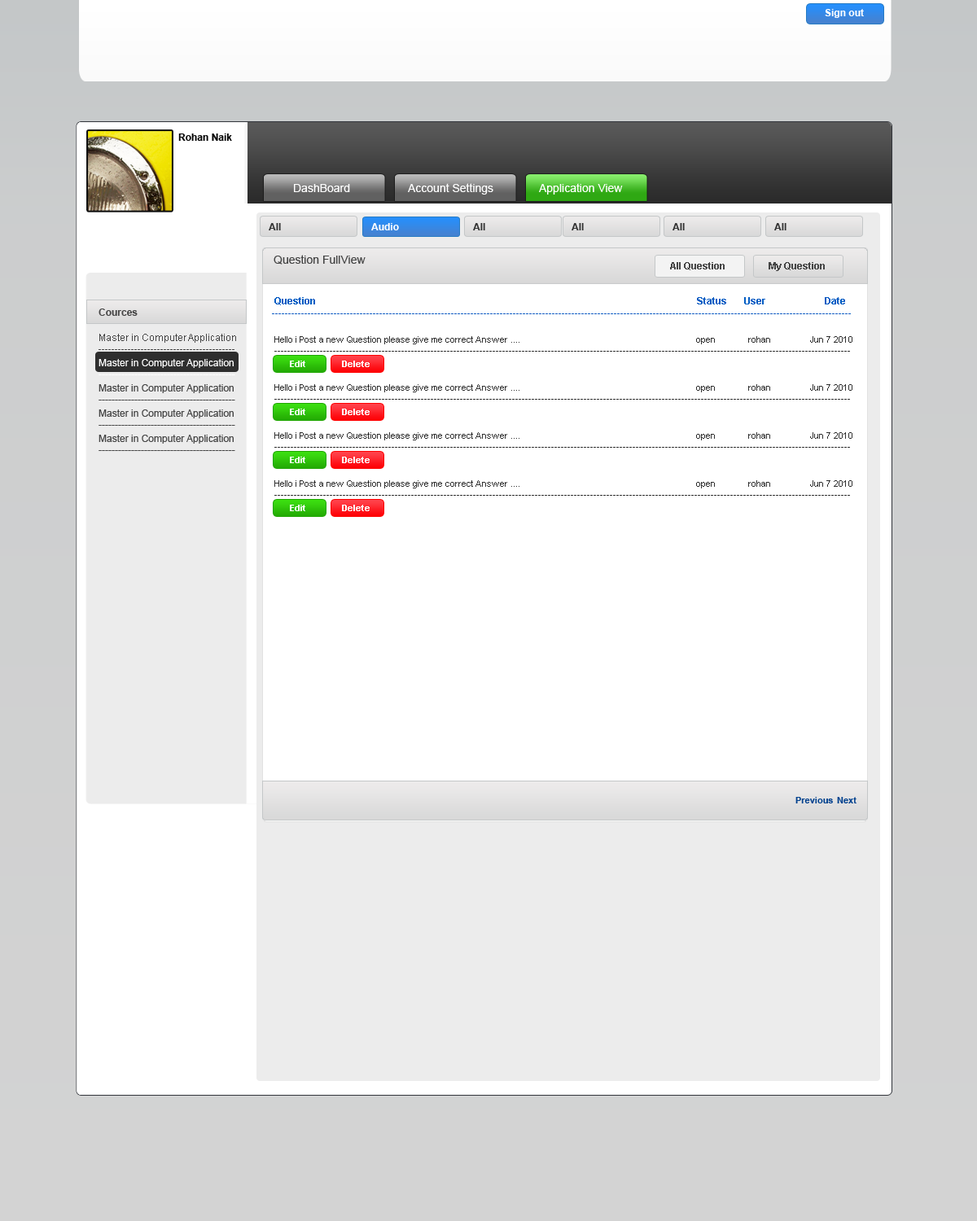
<style>
.page{position:relative;width:977px;height:1221px;background:#ffffff}
.page>*{position:absolute;margin:0}
.t1{font:9.8px "Arial-BoldMT";color:#ffffff}
.t2{font:9.8px "Arial-BoldMT";color:#060606}
.t3{font:11.4px "ArialMT";color:#ffffff}
.t4{font:9.8px "Arial-BoldMT";color:#323232}
.t5{font:11.4px "ArialMT";color:#454545}
.t6{font:9.8px "Arial-BoldMT";color:#454545}
.t7{font:9.8px "Arial-BoldMT";color:#025cc3}
.t8{font:9.8px "Arial-BoldMT";color:#464646}
.t9{font:9.8px "ArialMT";color:#464646}
.t10{font:9px "ArialMT";color:#2f2f2f}
.t11{font:9.8px "ArialMT";color:#ffffff}
.t12{font:9px "Arial-BoldMT";color:#fefefe}
.t13{font:9px "Arial-BoldMT";color:#02418e}
</style>
<div class="page">
<p class="t1" style="left:824px;top:9px;width:40px;height:9px">Sign out</p>
<p class="t2" style="left:178px;top:133px;width:54px;height:8px">Rohan Naik</p>
<p class="t3" style="left:294px;top:184px;width:56px;height:8px">DashBoard</p>
<p class="t3" style="left:408px;top:183px;width:85px;height:12px">Account Settings</p>
<p class="t3" style="left:539px;top:183px;width:84px;height:12px">Application View</p>
<p class="t4" style="left:269px;top:223px;width:12px;height:7px">All</p>
<p class="t1" style="left:371px;top:223px;width:28px;height:7px">Audio</p>
<p class="t4" style="left:473px;top:223px;width:12px;height:7px">All</p>
<p class="t4" style="left:571px;top:223px;width:13px;height:7px">All</p>
<p class="t4" style="left:672px;top:223px;width:13px;height:7px">All</p>
<p class="t4" style="left:774px;top:223px;width:12px;height:7px">All</p>
<p class="t5" style="left:273px;top:255px;width:92px;height:10px">Question FullView</p>
<p class="t6" style="left:670px;top:262px;width:54px;height:8px">All Question</p>
<p class="t6" style="left:768px;top:262px;width:56px;height:9px">My Question</p>
<p class="t7" style="left:274px;top:297px;width:571px;height:8px">Question                                                                                                                                                            Status       User                        Date</p>
<p class="t8" style="left:98px;top:308px;width:40px;height:8px">Cources</p>
<p class="t7" style="left:272px;top:313px;width:579px;height:1px">----------------------------------------------------------------------------------------------------------------------------------------------------------------------------------</p>
<p class="t9" style="left:98px;top:334px;width:138px;height:16px">Master in Computer Application<br>------------------------------------------</p>
<p class="t10" style="left:274px;top:336px;width:578px;height:16px">Hello i Post a new Question please give me correct Answer ....                                                                        open         rohan                Jun 7 2010<br>---------------------------------------------------------------------------------------------------------------------------------------------------------------------------------</p>
<p class="t11" style="left:98px;top:359px;width:137px;height:16px">Master in Computer Application<br>------------------------------------------</p>
<p class="t12" style="left:290px;top:361px;width:15px;height:6px">Edit</p>
<p class="t12" style="left:342px;top:361px;width:28px;height:6px">Delete</p>
<p class="t9" style="left:98px;top:384px;width:137px;height:16px">Master in Computer Application<br>------------------------------------------</p>
<p class="t10" style="left:274px;top:384px;width:578px;height:16px">Hello i Post a new Question please give me correct Answer ....                                                                        open         rohan                Jun 7 2010<br>---------------------------------------------------------------------------------------------------------------------------------------------------------------------------------</p>
<p class="t9" style="left:98px;top:409px;width:137px;height:17px">Master in Computer Application<br>------------------------------------------</p>
<p class="t12" style="left:290px;top:409px;width:15px;height:6px">Edit</p>
<p class="t12" style="left:342px;top:409px;width:28px;height:6px">Delete</p>
<p class="t9" style="left:98px;top:435px;width:137px;height:16px">Master in Computer Application<br>------------------------------------------</p>
<p class="t10" style="left:274px;top:432px;width:578px;height:16px">Hello i Post a new Question please give me correct Answer ....                                                                        open         rohan                Jun 7 2010<br>---------------------------------------------------------------------------------------------------------------------------------------------------------------------------------</p>
<p class="t12" style="left:290px;top:457px;width:15px;height:6px">Edit</p>
<p class="t12" style="left:342px;top:457px;width:28px;height:6px">Delete</p>
<p class="t10" style="left:274px;top:480px;width:578px;height:16px">Hello i Post a new Question please give me correct Answer ....                                                                        open         rohan                Jun 7 2010<br>---------------------------------------------------------------------------------------------------------------------------------------------------------------------------------</p>
<p class="t12" style="left:290px;top:505px;width:15px;height:6px">Edit</p>
<p class="t12" style="left:342px;top:505px;width:28px;height:6px">Delete</p>
<p class="t13" style="left:795px;top:797px;width:38px;height:6px">Previous</p>
<p class="t13" style="left:837px;top:797px;width:19px;height:6px">Next</p>
</div>
